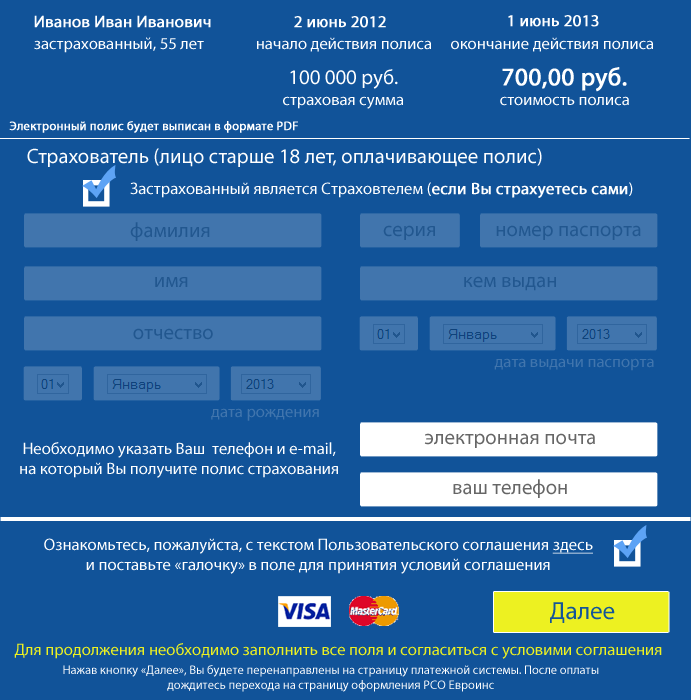
<style>
.page{position:relative;width:691px;height:700px;background:#115399}
.page>*{position:absolute;margin:0}
.t1{font:16.7px "MyriadPro-Regular";color:#ffffff;font-weight:bold}
.t2{font:16.7px "MyriadPro-Regular";color:#ffffff}
.t3{font:20.8px "MyriadPro-Regular";color:#ffffff}
.t4{font:25px "MyriadPro-Regular";color:#ffffff;font-weight:bold}
.t5{font:12.5px "MyriadPro-Regular";color:#ffffff;font-weight:bold}
.t6{font:20.8px "MyriadPro-Regular";color:#22578f}
.t7{font:16.7px "MyriadPro-Regular";color:#4175ad}
.t8{font:20.8px "MyriadPro-Regular";color:#666666}
.t9{font:16.7px "MyriadPro-Regular";color:#ffffff;text-decoration:underline}
.t10{font:25px "MyriadPro-Regular";color:#135599}
.t11{font:16.7px "MyriadPro-Regular";color:#edf121}
.t12{font:12.5px "MyriadPro-Regular";color:#ffffff}
</style>
<div class="page">
<p class="t1" style="left:34px;top:15px;width:177px;height:13px">Иванов Иван Иванович</p>
<p class="t1" style="left:294px;top:16px;width:92px;height:12px">2 июнь 2012</p>
<p class="t1" style="left:508px;top:15px;width:91px;height:12px">1 июнь 2013</p>
<p class="t2" style="left:34px;top:37px;width:170px;height:16px">застрахованный, 55 лет</p>
<p class="t2" style="left:257px;top:37px;width:174px;height:15px">начало действия полиса</p>
<p class="t2" style="left:451px;top:37px;width:202px;height:15px">окончание действия полиса</p>
<p class="t3" style="left:290px;top:69px;width:108px;height:20px">100 000 руб.</p>
<p class="t4" style="left:502px;top:67px;width:125px;height:25px">700,00 руб.</p>
<p class="t2" style="left:283px;top:96px;width:120px;height:13px">страховая сумма</p>
<p class="t2" style="left:500px;top:96px;width:129px;height:10px">стоимость полиса</p>
<p class="t5" style="left:9px;top:121px;width:289px;height:12px">Электронный полис будет выписан в формате PDF</p>
<p class="t3" style="left:27px;top:148px;width:515px;height:19px">Страхователь (лицо старше 18 лет, оплачивающее полис)</p>
<p class="t2" style="left:130px;top:182px;width:503px;height:16px">Застрахованный является Страховтелем (<span class="t1">если Вы страхуетесь сами</span>)</p>
<p class="t6" style="left:130px;top:222px;width:80px;height:19px">фамилия</p>
<p class="t6" style="left:383px;top:225px;width:52px;height:15px">серия</p>
<p class="t6" style="left:496px;top:225px;width:145px;height:15px">номер паспорта</p>
<p class="t6" style="left:155px;top:277px;width:33px;height:10px">имя</p>
<p class="t6" style="left:464px;top:276px;width:92px;height:15px">кем выдан</p>
<p class="t6" style="left:133px;top:328px;width:80px;height:12px">отчество</p>
<p class="t7" style="left:494px;top:358px;width:160px;height:13px">дата выдачи паспорта</p>
<p class="t7" style="left:211px;top:408px;width:108px;height:13px">дата рождения</p>
<p class="t8" style="left:424px;top:433px;width:171px;height:15px">электронная почта</p>
<p class="t2" style="left:20px;top:442px;width:318px;height:36px;text-align:center">Необходимо указать Ваш  телефон и e-mail, на который Вы получите полис страхования</p>
<p class="t8" style="left:453px;top:479px;width:114px;height:19px">ваш телефон</p>
<p class="t2" style="left:44px;top:538px;width:549px;height:36px;text-align:center">Ознакомьтесь, пожалуйста, с текстом Пользовательского соглашения <span class="t9">здесь</span> и поставьте «галочку» в поле для принятия условий соглашения</p>
<p class="t10" style="left:550px;top:602px;width:65px;height:21px">Далее</p>
<p class="t11" style="left:14px;top:643px;width:648px;height:16px">Для продолжения необходимо заполнить все поля и согласиться с условими соглашения</p>
<p class="t12" style="left:63px;top:665px;width:536px;height:27px;text-align:center">Нажав кнопку «Далее», Вы будете перенаправлены на страницу платежной системы. После оплаты дождитесь перехода на страницу оформления РСО Евроинс</p>
</div>
